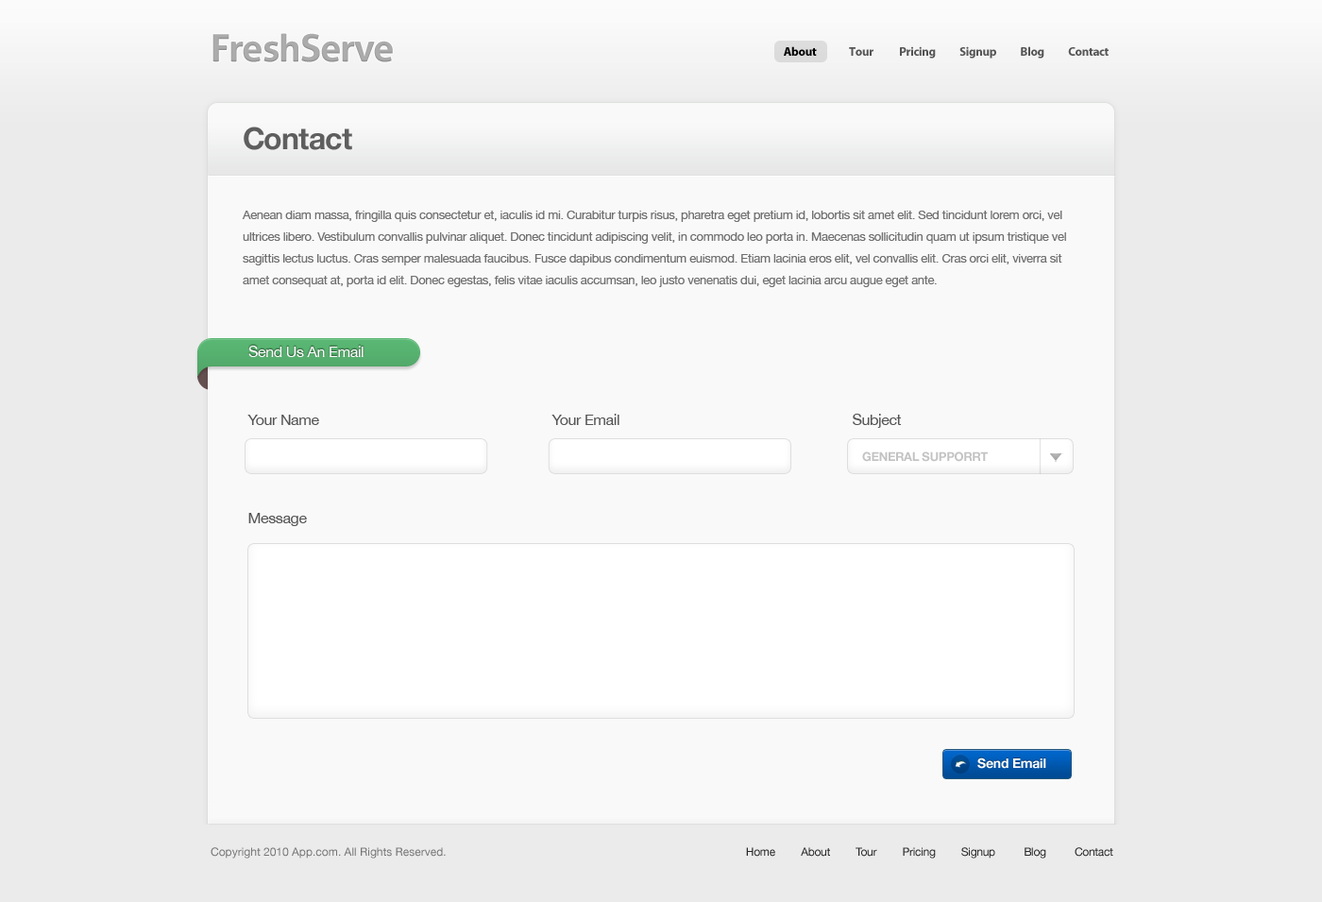
<style>
.page{position:relative;width:1322px;height:902px;background:#ebebeb}
.page>*{position:absolute;margin:0}
.t1{font:37.8px "Aller-Bold";letter-spacing:-0.025em;color:#acacac}
.t2{font:12.3px "MyriadPro-Bold";letter-spacing:-0.025em;color:#555555}
.t3{font:12.3px "MyriadPro-Bold";letter-spacing:-0.025em;color:#000000}
.t4{font:30.2px "HelveticaNeue-Bold";letter-spacing:-0.025em;color:#5e5e5e}
.t5{font:12.3px/21.7px "HelveticaNeue";letter-spacing:-0.025em;color:#707070}
.t6{font:15.1px "HelveticaNeue";letter-spacing:-0.025em;color:#ffffff}
.t7{font:15.1px "HelveticaNeue";letter-spacing:-0.025em;color:#555555}
.t8{font:12.3px "HelveticaNeue-Bold";letter-spacing:-0.025em;color:#c3c3c3}
.t9{font:13.2px "HelveticaNeue-Bold";letter-spacing:-0.015em;color:#ffffff}
.t10{font:11.3px "HelveticaNeue";color:#757575}
.t11{font:11.3px "HelveticaNeue";letter-spacing:-0.025em;color:#2a2a2a}
</style>
<div class="page">
<p class="t1" style="left:212px;top:33px;width:181px;height:29px">FreshServe</p>
<p class="t2" style="left:784px;top:46px;width:325px;height:13px"><span class="t3">About               </span>Tour            Pricing           Signup           Blog           Contact</p>
<p class="t4" style="left:244px;top:127px;width:108px;height:23px">Contact</p>
<p class="t5" style="left:242px;top:211px;width:824px;height:76px">Aenean diam massa, fringilla quis consectetur et, iaculis id mi. Curabitur turpis risus, pharetra eget pretium id, lobortis sit amet elit. Sed tincidunt lorem orci, vel ultrices libero. Vestibulum convallis pulvinar aliquet. Donec tincidunt adipiscing velit, in commodo leo porta in. Maecenas sollicitudin quam ut ipsum tristique vel sagittis lectus luctus. Cras semper malesuada faucibus. Fusce dapibus condimentum euismod. Etiam lacinia eros elit, vel convallis elit. Cras orci elit, viverra sit amet consequat at, porta id elit. Donec egestas, felis vitae iaculis accumsan, leo justo venenatis dui, eget lacinia arcu augue eget ante.</p>
<p class="t6" style="left:248px;top:346px;width:116px;height:11px">Send Us An Email</p>
<p class="t7" style="left:552px;top:414px;width:68px;height:11px">Your Email</p>
<p class="t7" style="left:853px;top:414px;width:49px;height:14px">Subject</p>
<p class="t7" style="left:247px;top:415px;width:72px;height:10px">Your Name</p>
<p class="t8" style="left:862px;top:451px;width:126px;height:11px">GENERAL SUPPORRT</p>
<p class="t7" style="left:248px;top:513px;width:59px;height:13px">Message</p>
<p class="t9" style="left:977px;top:757px;width:69px;height:12px">Send Email</p>
<p class="t10" style="left:211px;top:847px;width:235px;height:11px">Copyright 2010 App.com. All Rights Reserved.</p>
<p class="t11" style="left:746px;top:847px;width:367px;height:11px">Home         About         Tour         Pricing         Signup          Blog          Contact</p>
</div>
